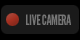
<style>
.page{position:relative;width:80px;height:40px;background:#1a1a1a}
.page>*{position:absolute;margin:0}
.t1{font:14px "LeagueGothic";letter-spacing:-0.025em;color:#767676;text-transform:uppercase}
</style>
<div class="page">
<p class="t1" style="left:26px;top:14px;width:45px;height:11px">LIVE CAMERA</p>
</div>
